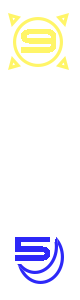
<style>
.page{position:relative;width:80px;height:300px;background:#ffffff}
.page>*{position:absolute;margin:0}
.t1{font:38px "O.K.Retro";color:#fff568;font-variant:small-caps}
.t2{font:38px "O.K.Retro";color:#2d28f8;font-variant:small-caps}
</style>
<div class="page">
<p class="t1" style="left:21px;top:29px;width:35px;height:24px">9</p>
<p class="t2" style="left:15px;top:237px;width:35px;height:24px">5</p>
</div>
